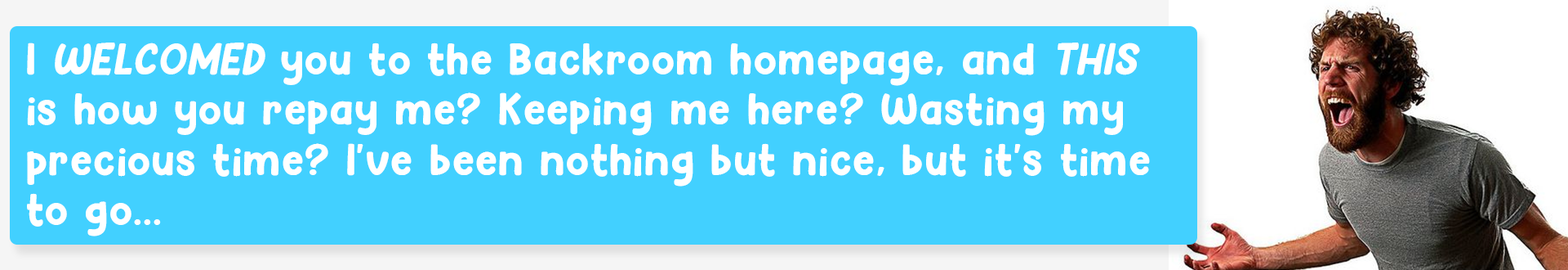
<style>
.page{position:relative;width:1568px;height:270px;background:#42d0ff}
.page>*{position:absolute;margin:0}
.t1{font:41.6px "Hey-Comic";letter-spacing:0.025em;color:#ffffff}
.t2{font:41.6px "Hey-Comic";letter-spacing:0.025em;color:#ffffff;font-style:italic}
</style>
<div class="page">
<p class="t1" style="left:27px;top:42px;width:1123px;height:194px">I <span class="t2">WELCOMED</span> you to the Backroom homepage, and <span class="t2">THIS</span> is how you repay me? Keeping me here? Wasting my precious time? I've been nothing but nice, but it's time to go...</p>
</div>
